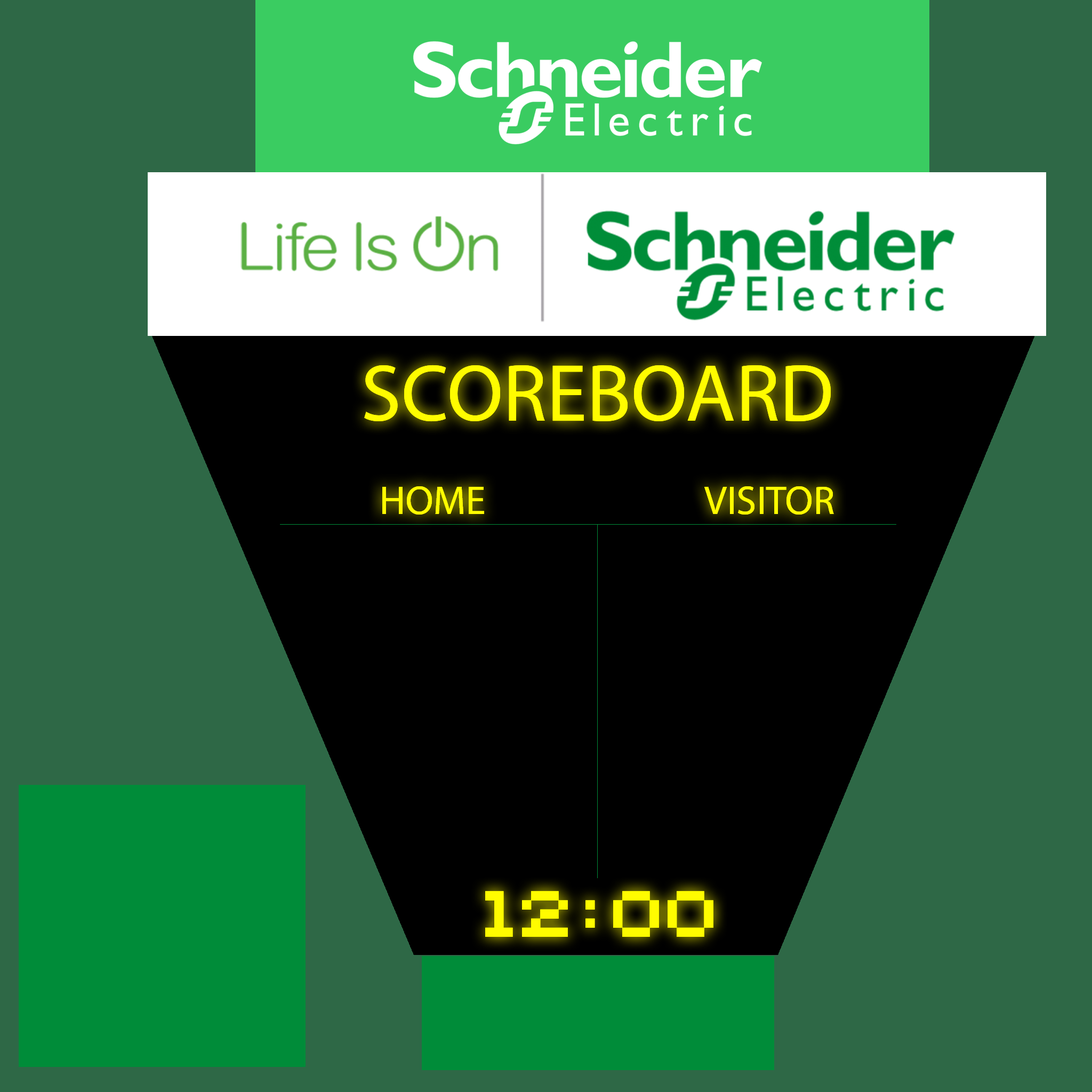
<style>
.page{position:relative;width:1092px;height:1092px;background:#2e6846}
.page>*{position:absolute;margin:0}
.t1{font:81.5px "MyriadPro-Regular";color:#fffc00;text-transform:uppercase}
.t2{font:40.5px "MyriadPro-Regular";color:#fffc00;text-transform:uppercase}
.t3{font:72.9px "Ceriph0553";color:#fffc00;text-transform:uppercase}
</style>
<div class="page">
<p class="t1" style="left:364px;top:365px;width:467px;height:57px">SCOREBOARD</p>
<p class="t2" style="left:382px;top:486px;width:102px;height:29px">HOME</p>
<p class="t2" style="left:704px;top:486px;width:130px;height:29px">VISITOR</p>
<p class="t3" style="left:485px;top:891px;width:228px;height:46px">12:00</p>
</div>
